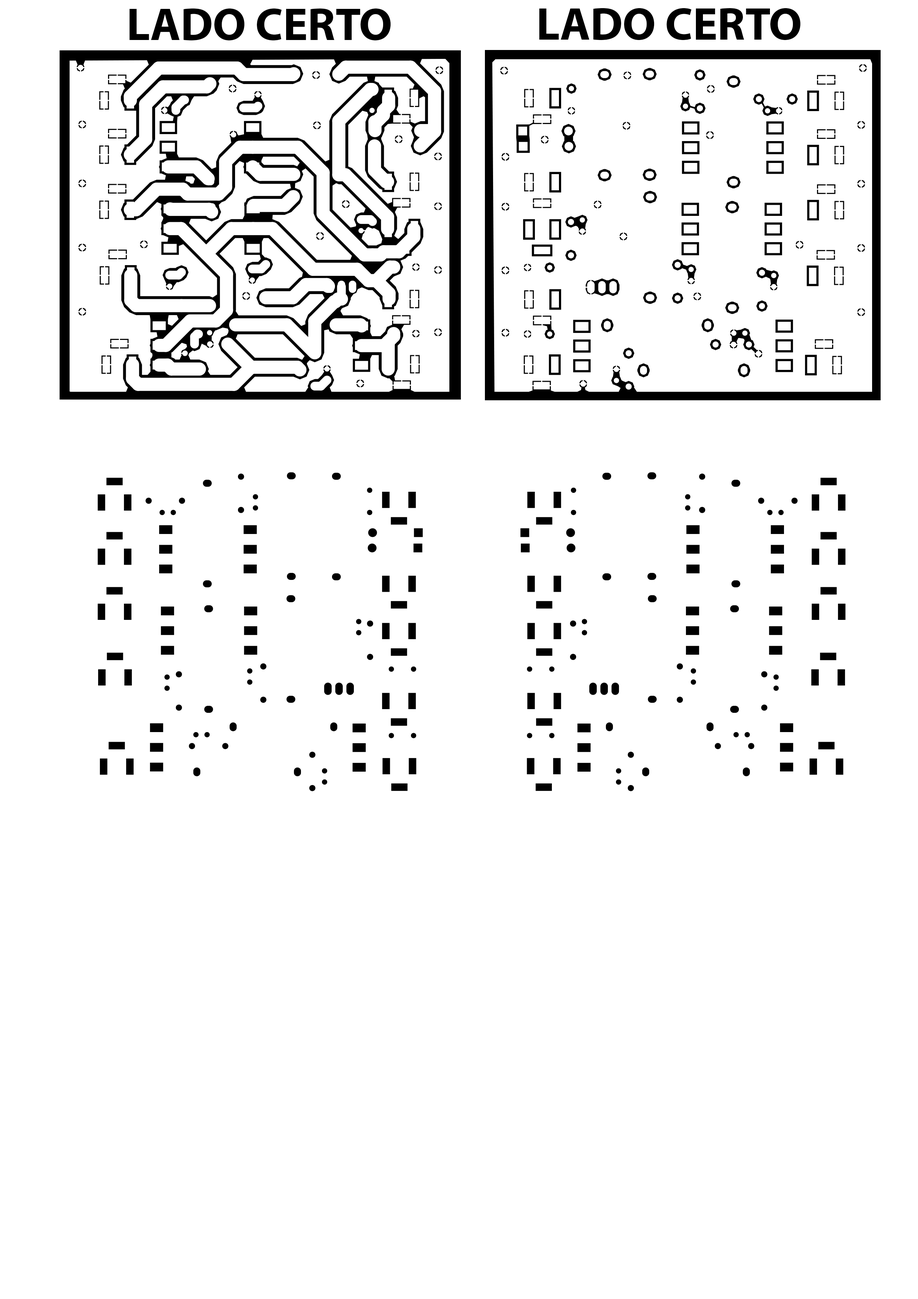
<style>
.page{position:relative;width:918px;height:1299px;background:#ffffff}
.page>*{position:absolute;margin:0}
.t1{font:46.3px "MyriadPro-Bold";color:#000000}
</style>
<div class="page">
<p class="t1" style="left:130px;top:8px;width:261px;height:33px">LADO CERTO</p>
<p class="t1" style="left:539px;top:8px;width:262px;height:32px">LADO CERTO</p>
</div>
